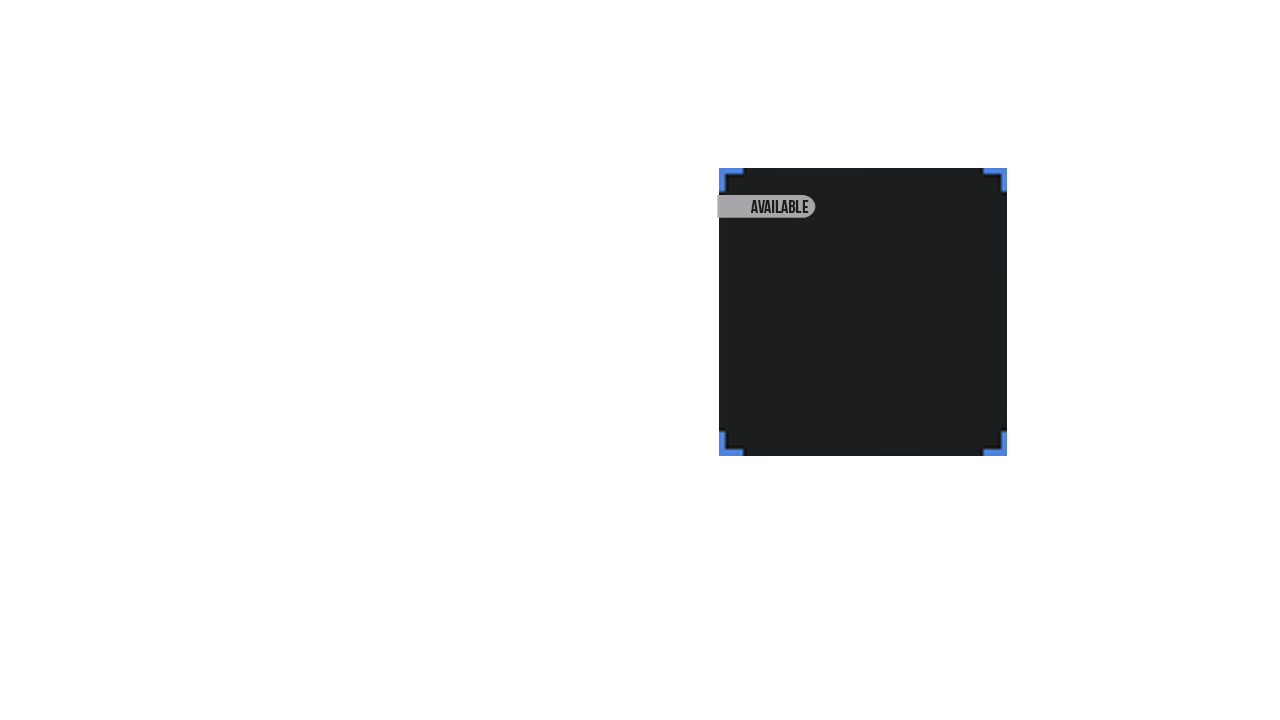
<style>
.page{position:relative;width:1280px;height:720px;background:#ffffff}
.page>*{position:absolute;margin:0}
.t1{font:18px "BebasNeue-Bold";color:#1c1e1e}
</style>
<div class="page">
<p class="t1" style="left:750px;top:200px;width:59px;height:13px">Available</p>
</div>
